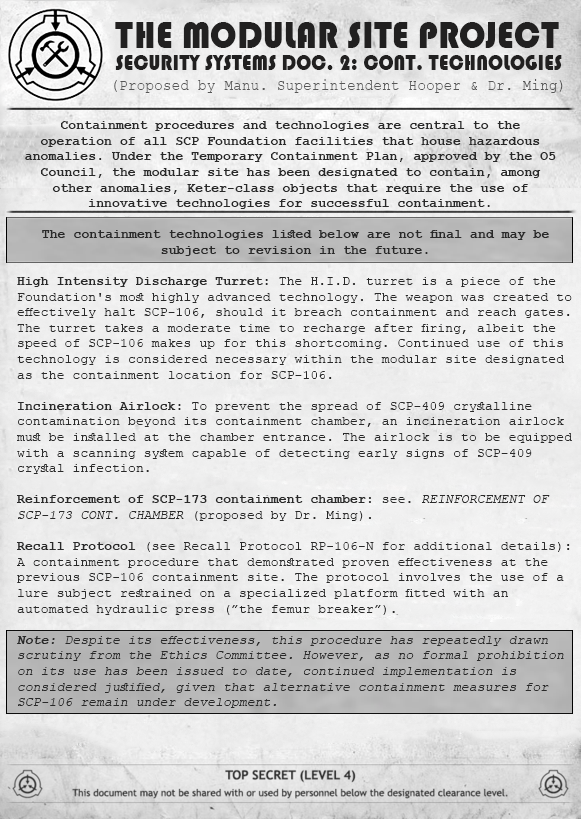
<style>
.page{position:relative;width:581px;height:819px}
.page>*{position:absolute;margin:0}
.t1{font:38.8px "Bauhaus93";letter-spacing:0.01em;color:#212020;scale:0.9 1}
.t2{font:22px "Bauhaus93";letter-spacing:0.01em;color:#212020;scale:0.9 1}
.t3{font:16px "CourierNewPSMT";letter-spacing:0.01em;color:#575757;scale:0.9 1}
.t4{font:13px "CourierNewPS-BoldMT";letter-spacing:0.01em;color:#292929}
.t5{font:13px "CourierNewPSMT";letter-spacing:0.01em;color:#292929}
.t6{font:13px "CourierNewPSMT";letter-spacing:0.01em;color:#292929;text-transform:uppercase;font-style:italic}
.t7{font:13px "CourierNewPS-BoldMT";letter-spacing:0.01em;color:#292929;font-style:italic}
.t8{font:13px "CourierNewPSMT";letter-spacing:0.01em;color:#292929;font-style:italic}
</style>
<div class="page">
<p class="t1" style="left:115px;top:22px;width:444px;height:26px">THE MODULAR SITE PROJECT</p>
<p class="t2" style="left:115px;top:55px;width:447px;height:15px">SECURITY SYSTEMS DOC. 2: CONT. TECHNOLOGIES</p>
<p class="t3" style="left:114px;top:79px;width:449px;height:14px">(Proposed by Manu. Superintendent Hooper &amp; Dr. Ming)</p>
<p class="t4" style="left:25px;top:121px;width:531px;height:88px;text-align:center">Containment procedures and technologies are central to the operation of all SCP Foundation facilities that house hazardous anomalies. Under the Temporary Containment Plan, approved by the O5 Council, the modular site has been designated to contain, among other anomalies, Keter-class objects that require the use of innovative technologies for successful containment.</p>
<p class="t5" style="left:17px;top:230px;width:555px;height:478px;text-align:center"><span class="t4">The containment technologies listed below are not final and may be subject to revision in the future.<br><br>High Intensity Discharge Turret: </span>The H.I.D. turret is a piece of the Foundation's most highly advanced technology. The weapon was created to effectively halt SCP-106, should it breach containment and reach gates. The turret takes a moderate time to recharge after firing, albeit the speed of SCP-106 makes up for this shortcoming. Continued use of this technology is considered necessary within the modular site designated as the containment location for SCP-106.<br><span class="t4"><br>Incineration Airlock: </span>To prevent the spread of SCP-409 crystalline contamination beyond its containment chamber, an incineration airlock must be installed at the chamber entrance. The airlock is to be equipped with a scanning system capable of detecting early signs of SCP-409 crystal infection.<br><br><span class="t4">Reinforcement of SCP-173 containment chamber:</span> see. <span class="t6">Reinforcement of SCP-173 Cont. chamber</span> (proposed by Dr. Ming). <br><span class="t4"><br>Recall Protocol </span>(see Recall Protocol RP-106-N for additional details): A containment procedure that demonstrated proven effectiveness at the previous SCP-106 containment site. The protocol involves the use of a lure subject restrained on a specialized platform fitted with an automated hydraulic press (”the femur breaker”).<br><br><span class="t7">Note: </span><span class="t8">Despite its effectiveness, this procedure has repeatedly drawn scrutiny from the Ethics Committee. However, as no formal prohibition on its use has been issued to date, continued implementation is considered justified, given that alternative containment measures for SCP-106 remain under development.</span></p>
</div>
